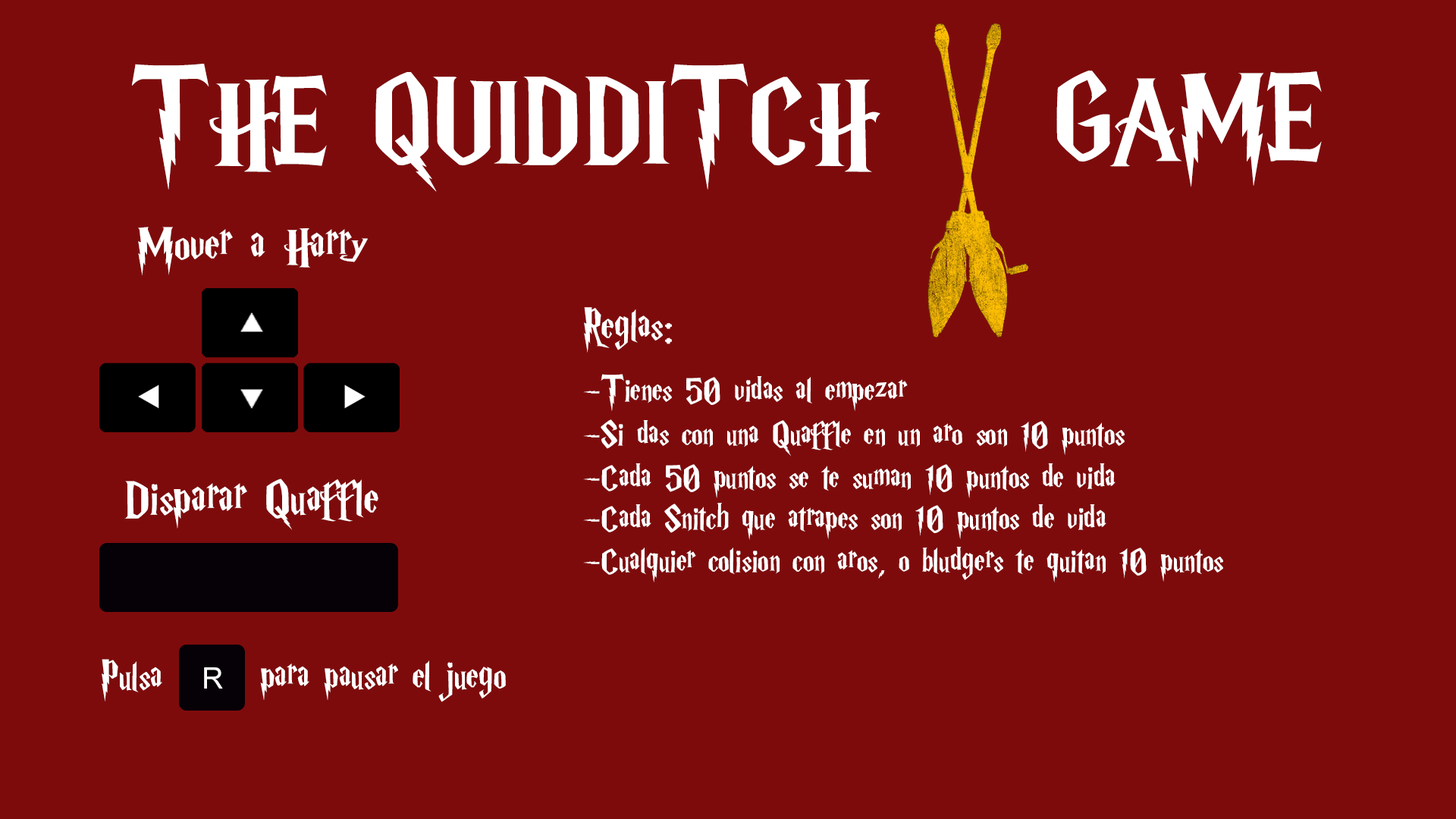
<style>
.page{position:relative;width:1456px;height:819px;background:#7e0b0c}
.page>*{position:absolute;margin:0}
.t1{font:126.5px "HarryP";color:#ffffff}
.t2{font:53.6px "HarryP";color:#ffffff}
.t3{font:46.7px "HarryP";color:#ffffff}
.t4{font:37.4px "HarryP";color:#ffffff}
.t5{font:43.5px "HarryP";color:#ffffff}
.t6{font:29.5px "ArialMT";color:#ffffff}
</style>
<div class="page">
<p class="t1" style="left:132px;top:64px;width:748px;height:128px">THE QUIDDITCH</p>
<p class="t1" style="left:1056px;top:71px;width:266px;height:116px">GAME</p>
<p class="t2" style="left:138px;top:227px;width:230px;height:48px">Mover a Harry</p>
<p class="t3" style="left:584px;top:307px;width:88px;height:46px">Reglas:</p>
<p class="t4" style="left:583px;top:374px;width:325px;height:37px">-Tienes 50 vidas al empezar</p>
<p class="t4" style="left:583px;top:419px;width:542px;height:38px">-Si das con una Quaffle en un aro son 10 puntos</p>
<p class="t4" style="left:583px;top:463px;width:532px;height:35px">-Cada 50 puntos se te suman 10 puntos de vida</p>
<p class="t2" style="left:124px;top:479px;width:254px;height:51px">Disparar Quaffle</p>
<p class="t4" style="left:583px;top:503px;width:523px;height:37px">-Cada Snitch que atrapes son 10 puntos de vida</p>
<p class="t4" style="left:583px;top:547px;width:640px;height:35px">-Cualquier colision con aros, o bludgers te quitan 10 puntos</p>
<p class="t5" style="left:102px;top:659px;width:60px;height:42px">Pulsa</p>
<p class="t5" style="left:260px;top:660px;width:246px;height:42px">para pausar el juego</p>
<p class="t6" style="left:204px;top:667px;width:19px;height:22px">R</p>
</div>
